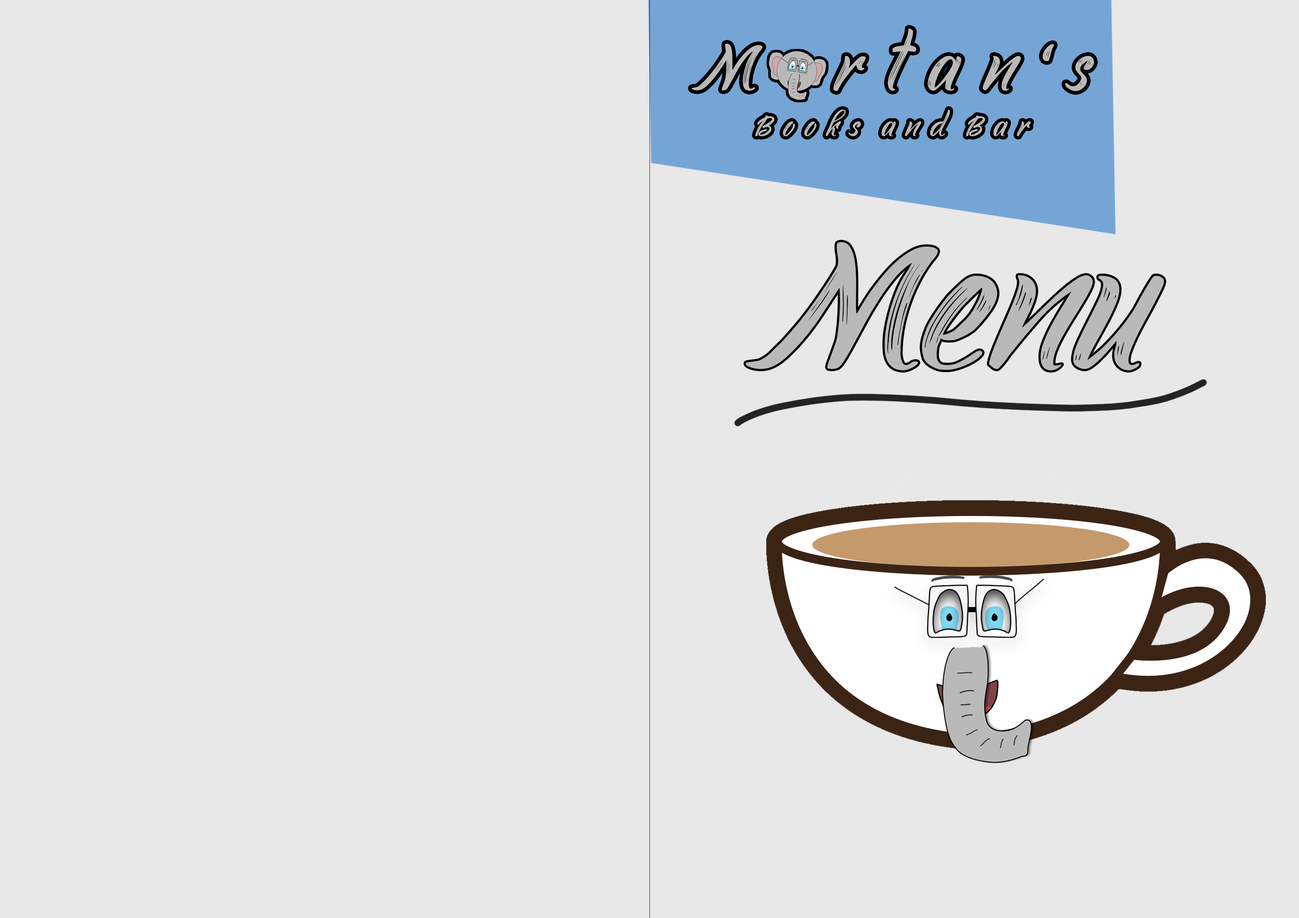
<style>
.page{position:relative;width:1299px;height:918px;background:#e8e8e8}
.page>*{position:absolute;margin:0}
.t1{font:102.1px "YouthTouchDEMO-Regular";color:#b9b9b9}
.t2{font:43.8px "YouthTouchDEMO-Regular";color:#b9b9b9}
</style>
<div class="page">
<p class="t1" style="left:692px;top:29px;width:402px;height:62px">M   r t a n ‘s</p>
<p class="t2" style="left:755px;top:110px;width:276px;height:26px">B o o k s  a n d  B a r</p>
</div>
